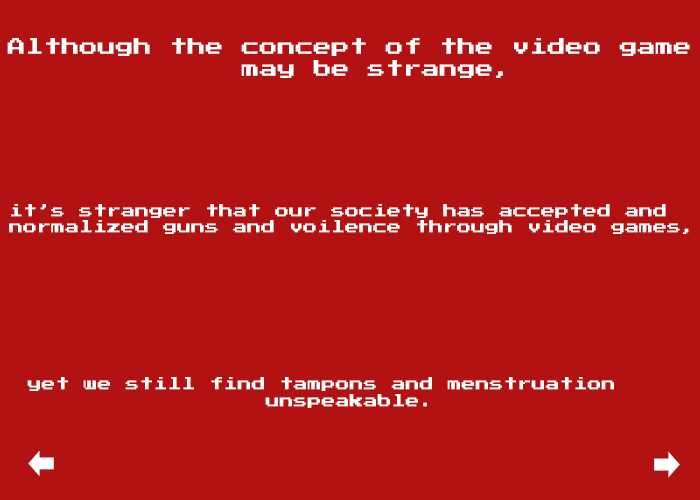
<style>
.page{position:relative;width:700px;height:500px;background:#b21212}
.page>*{position:absolute;margin:0}
.t1{font:18px "PressStart2P";color:#ffffff}
.t2{font:14px "PressStart2P";color:#ffffff}
</style>
<div class="page">
<p class="t1" style="left:7px;top:38px;width:683px;height:40px">Although the concept of the video game<br>             may be strange,</p>
<p class="t2" style="left:9px;top:204px;width:680px;height:30px">it’s stranger that our society has accepted and<br>normalized guns and voilence through video games,</p>
<p class="t2" style="left:27px;top:377px;width:587px;height:31px">yet we still find tampons and menstruation <br>                 unspeakable.</p>
</div>
